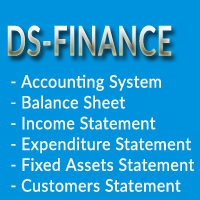
<style>
.page{position:relative;width:200px;height:200px;background:#0093dd}
.page>*{position:absolute;margin:0}
.t1{font:41.1px "Lato-Bold";letter-spacing:0.025em;scale:0.65 1}
.t2{font:17.3px "Lato-Medium";letter-spacing:0.025em;color:#f8f5f2;scale:0.92 1}
</style>
<div class="page">
<p class="t1" style="left:7px;top:25px;width:165px;height:31px">DS-FINANCE</p>
<p class="t2" style="left:11px;top:74px;width:184px;height:118px">- Accounting System<br>- Balance Sheet<br>- Income Statement<br>- Expenditure Statement<br>- Fixed Assets Statement<br>- Customers Statement</p>
</div>
